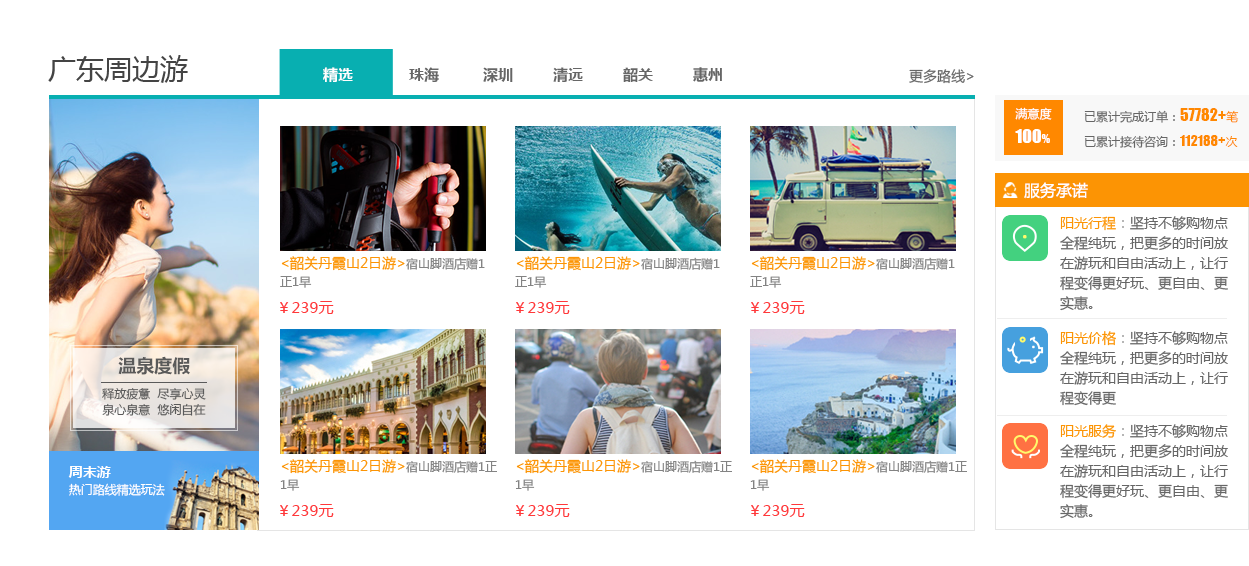
<style>
.page{position:relative;width:1249px;height:566px;background:#ffffff}
.page>*{position:absolute;margin:0}
.t1{font:28px "MicrosoftYaHei";color:#444444}
.t2{font:15px "MicrosoftYaHei-Bold";color:#666666}
.t3{font:15px "MicrosoftYaHei-Bold";color:#ffffff}
.t4{font:14px "MicrosoftYaHei";color:#666666}
.t5{font:12px/25px "MicrosoftYaHei";color:#ffffff}
.t6{font:18px/25px "Impact";color:#ffffff}
.t7{font:12px/25px "Impact";color:#ffffff}
.t8{font:12px/25px "MicrosoftYaHei";color:#666666}
.t9{font:16px/25px "Impact";color:#ff8800}
.t10{font:12px/25px "MicrosoftYaHei";color:#ff8800}
.t11{font:14px/25px "Impact";color:#ff8800}
.t12{font:16px "MicrosoftYaHei";color:#ffffff}
.t13{font:14px/20px "MicrosoftYaHei";color:#666666}
.t14{font:14px/20px "MicrosoftYaHei";color:#fc9404}
.t15{font:14px/20px "MicrosoftYaHei";color:#a4a4a4}
.t16{font:12px/18px "MicrosoftYaHei";color:#838383}
.t17{font:14px/18px "MicrosoftYaHei";color:#fc9404}
.t18{font:15px "MicrosoftYaHei";color:#ff383a}
.t19{font:18px "MicrosoftYaHei-Bold";color:#5a5a5a}
.t20{font:12px/16px "MicrosoftYaHei";color:#5a5a5a}
.t21{font:12px/18px "MicrosoftYaHei";color:#ffffff}
.t22{font:14px/18px "MicrosoftYaHei-Bold";color:#ffffff}
</style>
<div class="page">
<p class="t1" style="left:48px;top:55px;width:140px;height:28px">广东周边游</p>
<p class="t2" style="left:323px;top:67px;width:399px;height:16px"><span class="t3">精选              </span>珠海           深圳          清远          韶关          惠州</p>
<p class="t4" style="left:909px;top:69px;width:65px;height:15px">更多路线&gt;</p>
<p class="t5" style="left:1015px;top:107px;width:37px;height:36px">满意度<br><span class="t6">100</span><span class="t7">%</span></p>
<p class="t8" style="left:1084px;top:108px;width:155px;height:40px">已累计完成订单：<span class="t9">57782+</span><span class="t10">笔<br></span>已累计接待咨询：<span class="t11">112188+</span><span class="t10">次</span></p>
<p class="t12" style="left:1024px;top:182px;width:64px;height:17px">服务承诺</p>
<p class="t13" style="left:1060px;top:216px;width:168px;height:95px"><span class="t14">阳光行程</span><span class="t15">：</span>坚持不够购物点<br>全程纯玩，把更多的时间放<br>在游玩和自由活动上，让行<br>程变得更好玩、更自由、更<br>实惠。</p>
<p class="t16" style="left:280px;top:256px;width:205px;height:32px"><span class="t17">&lt;韶关丹霞山2日游&gt;</span>宿山脚酒店赠1<br>正1早</p>
<p class="t16" style="left:515px;top:256px;width:205px;height:32px"><span class="t17">&lt;韶关丹霞山2日游&gt;</span>宿山脚酒店赠1<br>正1早</p>
<p class="t16" style="left:750px;top:256px;width:205px;height:32px"><span class="t17">&lt;韶关丹霞山2日游&gt;</span>宿山脚酒店赠1<br>正1早</p>
<p class="t18" style="left:280px;top:301px;width:54px;height:13px">￥239元</p>
<p class="t18" style="left:516px;top:301px;width:54px;height:13px">￥239元</p>
<p class="t18" style="left:751px;top:301px;width:54px;height:13px">￥239元</p>
<p class="t13" style="left:1060px;top:331px;width:168px;height:75px"><span class="t14">阳光价格</span><span class="t15">：</span>坚持不够购物点<br>全程纯玩，把更多的时间放<br>在游玩和自由活动上，让行<br>程变得更</p>
<p class="t19" style="left:118px;top:356px;width:72px;height:19px">温泉度假</p>
<p class="t20" style="left:102px;top:388px;width:104px;height:28px">释放疲惫  尽享心灵<br>泉心泉意  悠闲自在</p>
<p class="t13" style="left:1060px;top:424px;width:168px;height:95px"><span class="t14">阳光服务</span><span class="t15">：</span>坚持不够购物点<br>全程纯玩，把更多的时间放<br>在游玩和自由活动上，让行<br>程变得更好玩、更自由、更<br>实惠。</p>
<p class="t16" style="left:280px;top:459px;width:217px;height:32px"><span class="t17">&lt;韶关丹霞山2日游&gt;</span>宿山脚酒店赠1正<br>1早</p>
<p class="t16" style="left:515px;top:459px;width:217px;height:32px"><span class="t17">&lt;韶关丹霞山2日游&gt;</span>宿山脚酒店赠1正<br>1早</p>
<p class="t16" style="left:750px;top:459px;width:217px;height:32px"><span class="t17">&lt;韶关丹霞山2日游&gt;</span>宿山脚酒店赠1正<br>1早</p>
<p class="t21" style="left:68px;top:466px;width:97px;height:30px"><span class="t22">周末游<br></span>热门路线精选玩法</p>
<p class="t18" style="left:280px;top:504px;width:54px;height:13px">￥239元</p>
<p class="t18" style="left:516px;top:504px;width:54px;height:13px">￥239元</p>
<p class="t18" style="left:751px;top:504px;width:54px;height:13px">￥239元</p>
</div>
